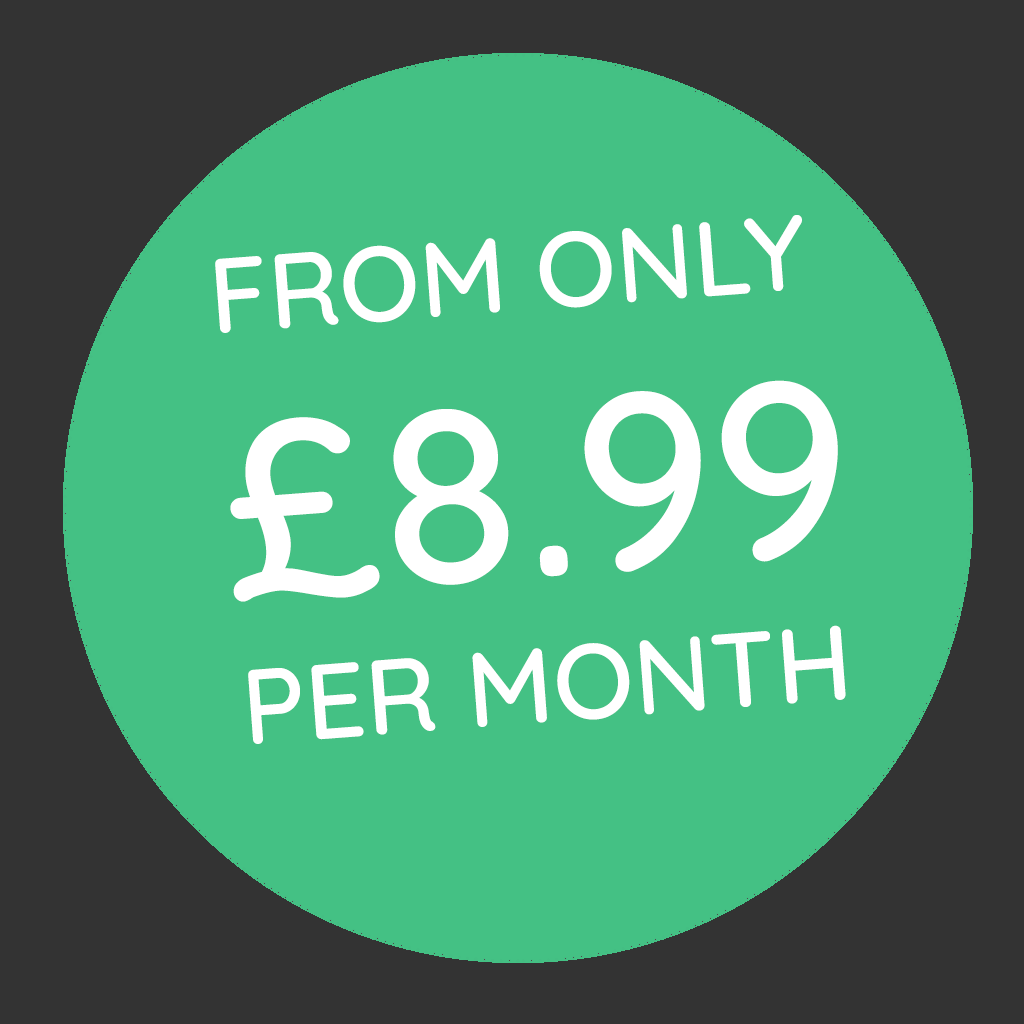
<style>
.page{position:relative;width:1024px;height:1024px;background:#44c184}
.page>*{position:absolute;margin:0}
.t1{font:105.8px "Quicksand-Medium";color:#ffffff}
.t2{font:250px "Quicksand-Medium";color:#ffffff}
</style>
<div class="page">
<p class="t1" style="left:215px;top:215px;width:587px;height:118px;rotate:-4deg">FROM ONLY</p>
<p class="t2" style="left:230px;top:380px;width:608px;height:222px;rotate:-4deg">£8.99</p>
<p class="t1" style="left:248px;top:625px;width:598px;height:119px;rotate:-4deg">PER MONTH</p>
</div>
